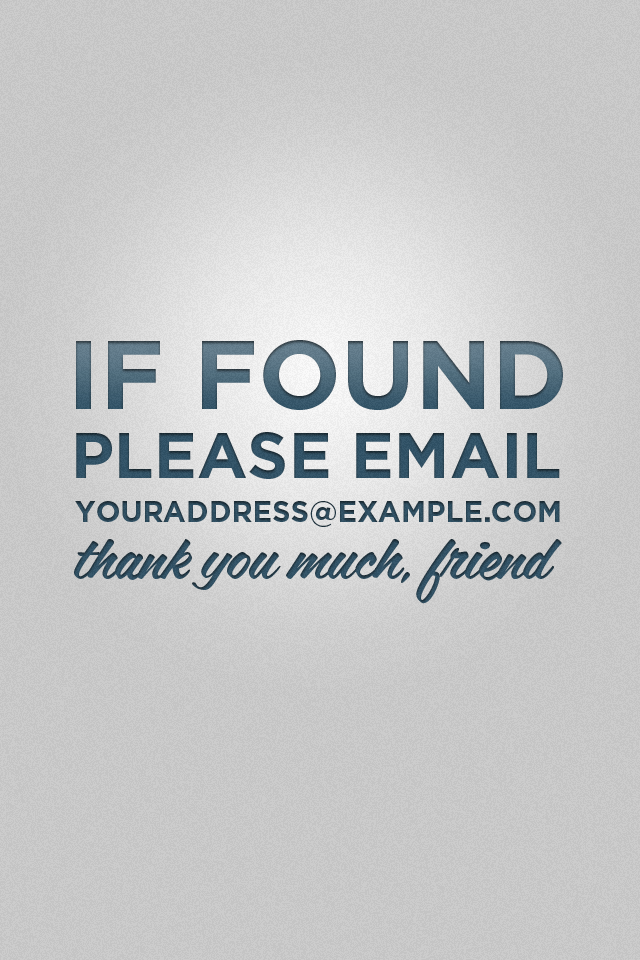
<style>
.page{position:relative;width:640px;height:960px;background:#c4c4c4}
.page>*{position:absolute;margin:0}
.t1{font:97.8px "Gotham-Bold";letter-spacing:0.001em;color:#4d6878;text-transform:uppercase}
.t2{font:64.2px "Gotham-Bold";letter-spacing:0.001em;color:#2e4f63;text-transform:uppercase}
.t3{font:28.9px "Gotham-Bold";letter-spacing:0.001em;color:#2c4958;text-transform:uppercase}
.t4{font:57.5px "CoffeeService";letter-spacing:0.001em;color:#2e4d5f}
</style>
<div class="page">
<p class="t1" style="left:76px;top:340px;width:487px;height:70px">if found</p>
<p class="t2" style="left:76px;top:432px;width:484px;height:47px">please email</p>
<p class="t3" style="left:75px;top:501px;width:485px;height:26px">youraddress@example.com</p>
<p class="t4" style="left:74px;top:539px;width:488px;height:65px">thank you much, friend</p>
</div>
